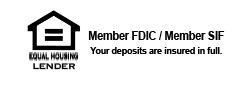
<style>
.page{position:relative;width:245px;height:85px;background:#ffffff}
.page>*{position:absolute;margin:0}
.t1{font:11.6px "Arial-BoldMT";letter-spacing:-0.025em;color:#000000;scale:0.95 1}
.t2{font:9.5px "Arial-BoldMT";letter-spacing:-0.025em;color:#000000;scale:0.95 1}
.t3{font:10.5px "Copperplate";letter-spacing:-0.025em;color:#000000}
</style>
<div class="page">
<p class="t1" style="left:88px;top:31px;width:137px;height:9px">Member FDIC / Member SIF</p>
<p class="t2" style="left:90px;top:47px;width:132px;height:9px">Your deposits are insured in full.</p>
<p class="t3" style="left:33px;top:63px;width:42px;height:7px">LENDER</p>
</div>
